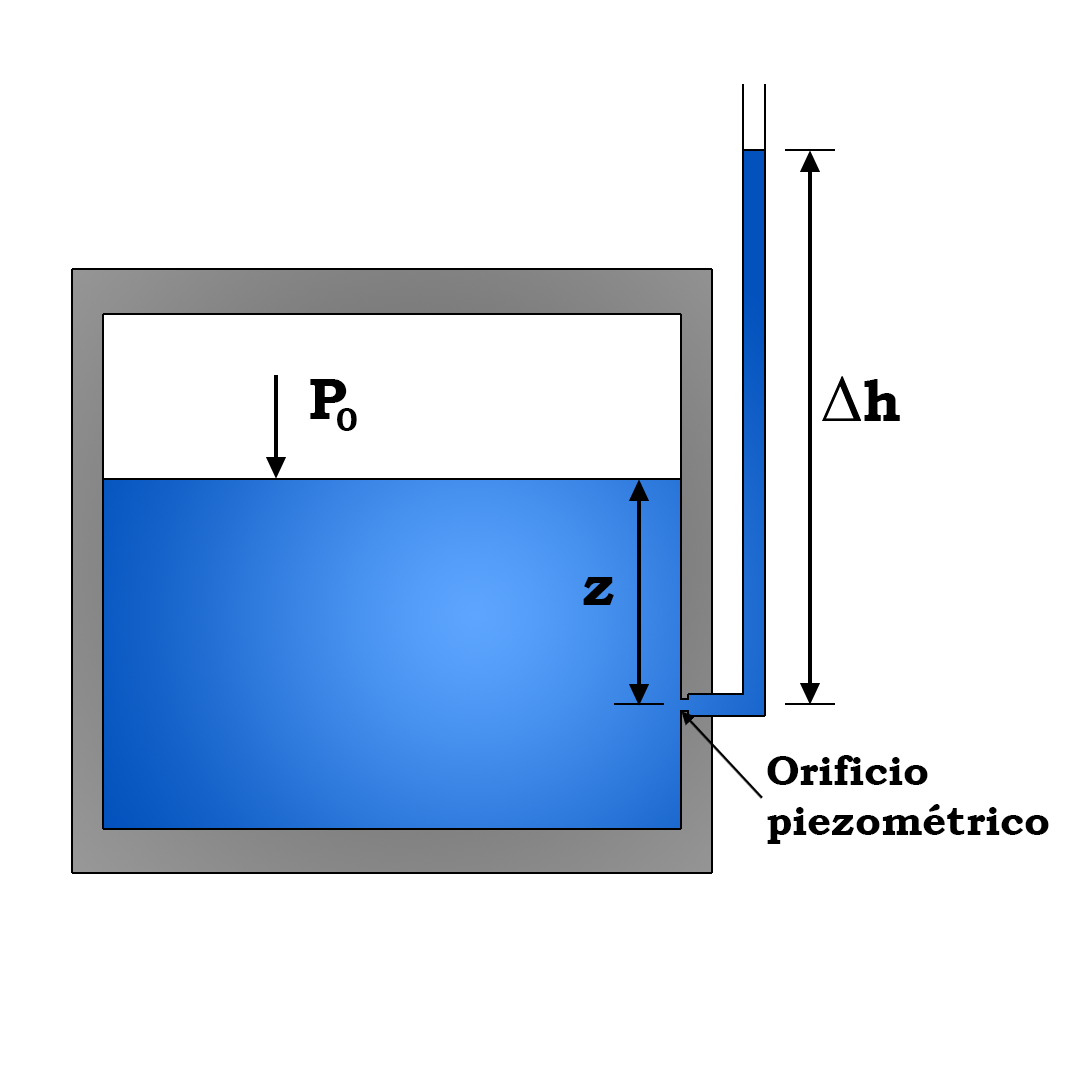
<style>
.page{position:relative;width:1080px;height:1080px;background:#ffffff}
.page>*{position:absolute;margin:0}
.t1{font:58.3px "BookmanOldStyle-Bold";color:#000000}
.t2{font:33.3px "BookmanOldStyle-Bold";color:#000000}
.t3{font:41.7px "BookmanOldStyle-Bold";color:#000000}
</style>
<div class="page">
<p class="t1" style="left:310px;top:379px;width:37px;height:40px">P</p>
<p class="t1" style="left:864px;top:379px;width:36px;height:42px">h</p>
<p class="t2" style="left:337px;top:408px;width:20px;height:23px">0</p>
<p class="t1" style="left:583px;top:577px;width:31px;height:28px">z</p>
<p class="t3" style="left:767px;top:755px;width:282px;height:89px">Orificio<br>piezométrico</p>
</div>
